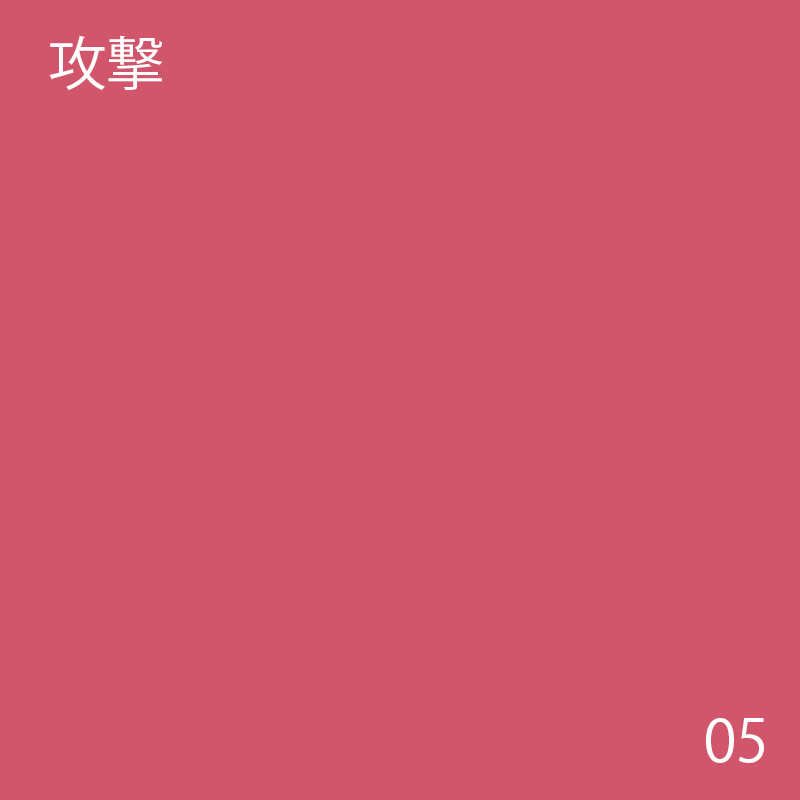
<style>
.page{position:relative;width:800px;height:800px;background:#d2566b}
.page>*{position:absolute;margin:0}
.t1{font:58.3px "KozGoPr6N-Regular";color:#ffffff}
</style>
<div class="page">
<p class="t1" style="left:49px;top:35px;width:114px;height:56px">攻撃</p>
<p class="t1" style="left:49px;top:35px;width:114px;height:56px">攻撃</p>
<p class="t1" style="left:49px;top:35px;width:114px;height:56px">攻撃</p>
<p class="t1" style="left:49px;top:35px;width:114px;height:56px">攻撃</p>
<p class="t1" style="left:49px;top:35px;width:114px;height:56px">攻撃</p>
<p class="t1" style="left:49px;top:35px;width:114px;height:56px">攻撃</p>
<p class="t1" style="left:706px;top:718px;width:58px;height:45px">05</p>
</div>
